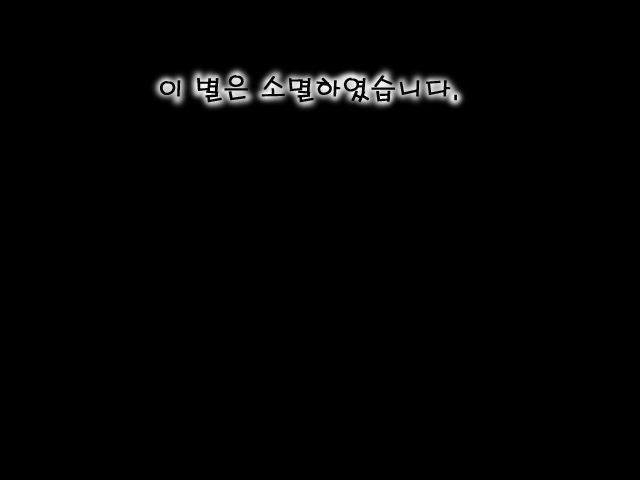
<style>
.page{position:relative;width:640px;height:480px;background:#000000}
.page>*{position:absolute;margin:0}
.t1{font:26.7px "H2porL";color:#030403;font-weight:bold}
</style>
<div class="page">
<p class="t1" style="left:160px;top:75px;width:297px;height:28px">이 별은 소멸하였습니다.</p>
</div>
